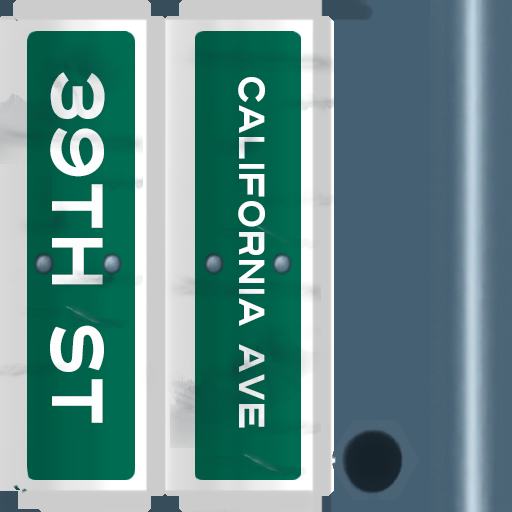
<style>
.page{position:relative;width:512px;height:512px}
.page>*{position:absolute;margin:0}
.t1{font:72px "Turnpike";color:#fefeff;scale:0.75 1}
.t2{font:36px "Turnpike";color:#fefeff;scale:0.75 1}
</style>
<div class="page">
<p class="t1" style="left:50px;top:72px;width:55px;height:351px;rotate:90deg">39th st</p>
<p class="t2" style="left:238px;top:77px;width:27px;height:351px;rotate:90deg">california ave</p>
</div>
